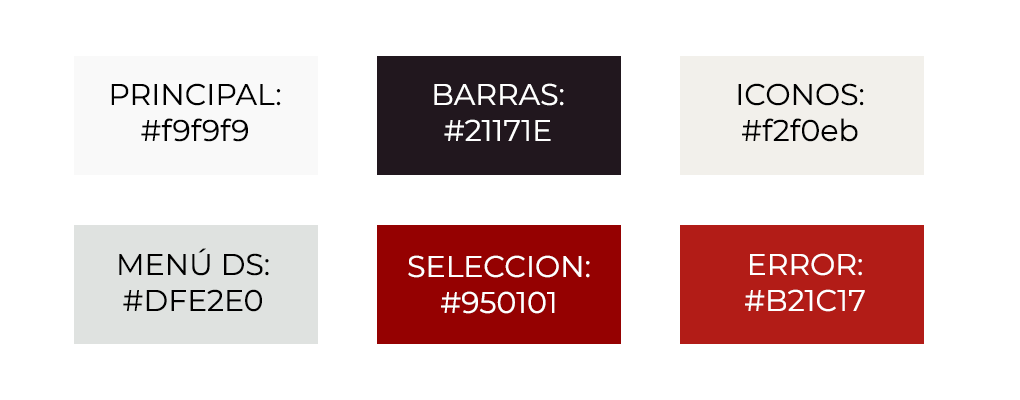
<style>
.page{position:relative;width:1020px;height:400px;background:#ffffff}
.page>*{position:absolute;margin:0}
.t1{font:30px "Montserrat-Regular";color:#000000}
.t2{font:30px "Montserrat-Regular";color:#ffffff}
</style>
<div class="page">
<p class="t1" style="left:111px;top:83px;width:170px;height:59px;text-align:center">PRINCIPAL:<br>#f9f9f9</p>
<p class="t2" style="left:434px;top:83px;width:130px;height:58px;text-align:center">BARRAS:<br>#21171E</p>
<p class="t1" style="left:738px;top:83px;width:126px;height:59px;text-align:center">ICONOS:<br>#f2f0eb</p>
<p class="t1" style="left:119px;top:248px;width:150px;height:64px;text-align:center">MENÚ DS:<br>#DFE2E0</p>
<p class="t2" style="left:408px;top:255px;width:182px;height:59px;text-align:center">SELECCION:<br>#950101</p>
<p class="t2" style="left:745px;top:253px;width:120px;height:59px;text-align:center">ERROR:<br>#B21C17</p>
</div>
